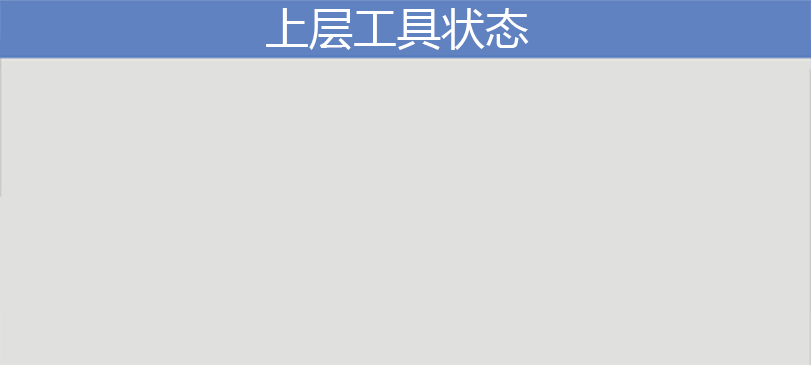
<style>
.page{position:relative;width:811px;height:365px;background:#e0e0df}
.page>*{position:absolute;margin:0}
.t1{font:44px "MicrosoftYaHei";color:#ffffff}
</style>
<div class="page">
<p class="t1" style="left:266px;top:8px;width:263px;height:42px">上层工具状态</p>
</div>
